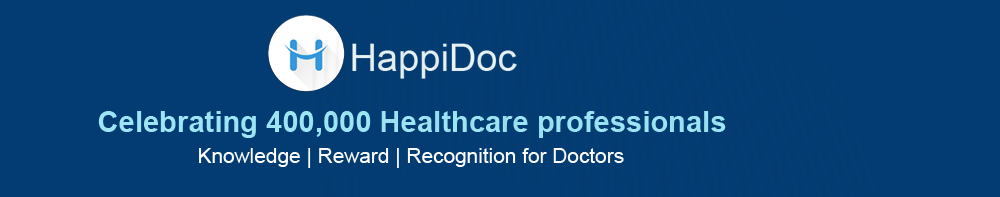
<style>
.page{position:relative;width:1000px;height:197px;background:#023c73}
.page>*{position:absolute;margin:0}
.t1{font:29.2px "Arial-BoldMT";color:#9be5f5}
.t2{font:20.8px "ArialMT";color:#ffffff}
</style>
<div class="page">
<p class="t1" style="left:98px;top:111px;width:628px;height:27px">Celebrating 400,000 Healthcare professionals</p>
<p class="t2" style="left:199px;top:148px;width:425px;height:20px">Knowledge | Reward | Recognition for Doctors</p>
</div>
